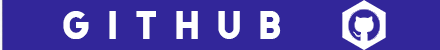
<style>
.page{position:relative;width:440px;height:50px;background:#32269a}
.page>*{position:absolute;margin:0}
.t1{font:37.5px "TheNextFont";letter-spacing:0.48em;color:#ffffff}
</style>
<div class="page">
<p class="t1" style="left:63px;top:11px;width:218px;height:28px">GITHUB</p>
</div>
